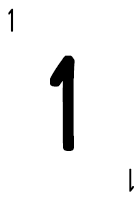
<style>
.page{position:relative;width:140px;height:200px;background:#ffffff}
.page>*{position:absolute;margin:0}
.t1{font:28.7px "CardenioModern-Reg";letter-spacing:-0.1em;color:#000000;text-transform:uppercase;font-weight:bold;scale:0.87 1}
.t2{font:115px "CardenioModern-Bold";letter-spacing:-0.1em;color:#000000;text-transform:uppercase;font-weight:bold;scale:0.87 1}
</style>
<div class="page">
<p class="t1" style="left:8px;top:8px;width:6px;height:24px">1</p>
<p class="t2" style="left:50px;top:55px;width:25px;height:96px">1</p>
<p class="t1" style="left:129px;top:168px;width:5px;height:24px;rotate:180deg">1</p>
</div>
